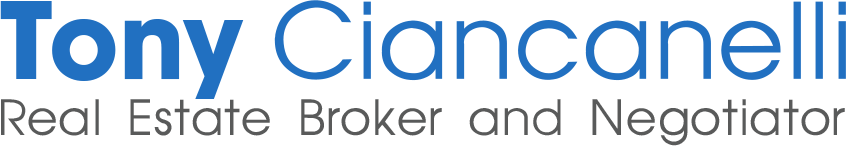
<style>
.page{position:relative;width:846px;height:146px;background:#ffffff}
.page>*{position:absolute;margin:0}
.t1{font:116.7px "AvantGarde";color:#2170c1}
.t2{font:116.7px "AvantGardeMdITC-Bold";color:#2170c1}
.t3{font:54px "AvantGarde";color:#595a5a}
</style>
<div class="page">
<p class="t1" style="left:0px;top:0px;width:846px;height:99px"><span class="t2">Tony </span>Ciancanelli</p>
<p class="t3" style="left:1px;top:99px;width:844px;height:47px">Real Estate Broker and Negotiator</p>
</div>
